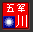
<style>
.page{position:relative;width:33px;height:32px;background:#f20000}
.page>*{position:absolute;margin:0}
.t1{font:10.4px "SimSun";color:#ffffff}
.t2{font:11.7px "SimSun";color:#ffffff}
</style>
<div class="page">
<p class="t1" style="left:7px;top:4px;width:18px;height:8px">五军</p>
<p class="t2" style="left:16px;top:15px;width:11px;height:12px">川</p>
</div>
